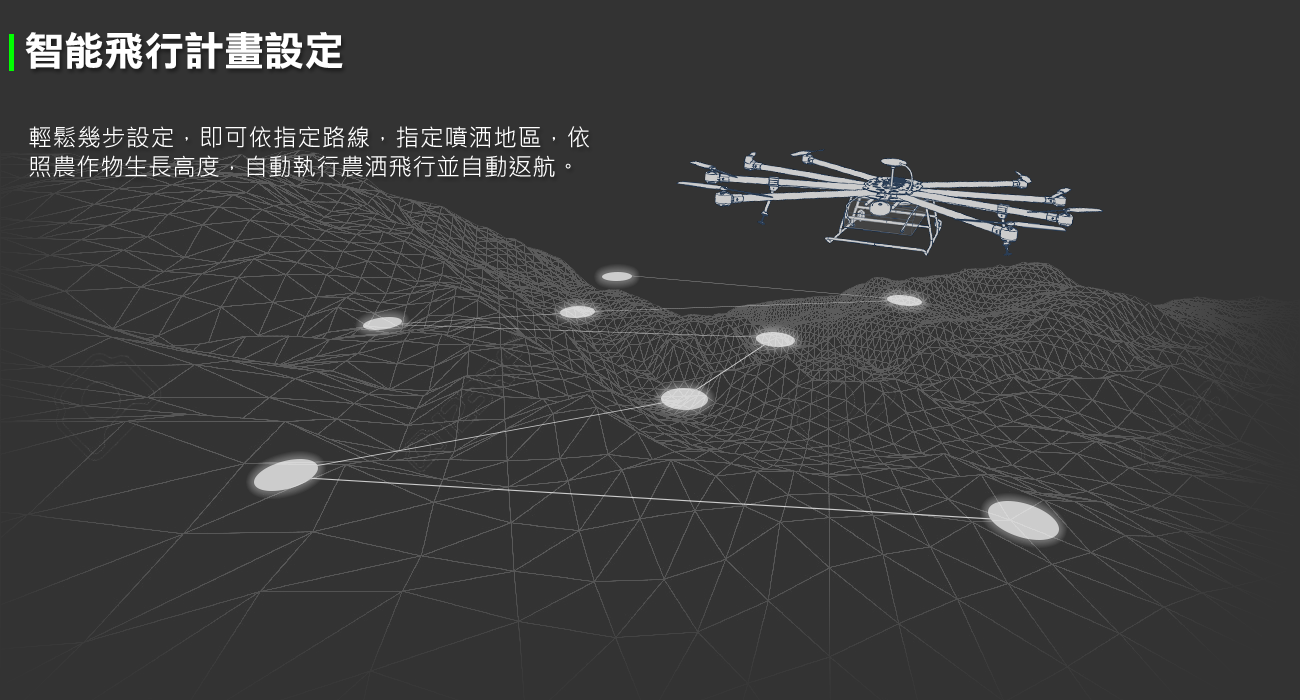
<style>
.page{position:relative;width:1300px;height:700px;background:#333333}
.page>*{position:absolute;margin:0}
.t1{font:40px "DFLiHei-Bd-WIN-BF";color:#ffffff}
.t2{font:24px/29.3px "MicrosoftJhengHeiRegular";color:#ffffff}
</style>
<div class="page">
<p class="t1" style="left:25px;top:32px;width:318px;height:37px">智能飛行計畫設定</p>
<p class="t2" style="left:29px;top:126px;width:560px;height:51px;text-align:justify">輕鬆幾步設定，即可依指定路線，指定噴洒地區，依照農作物生長高度，自動執行農洒飛行並自動返航。</p>
</div>
